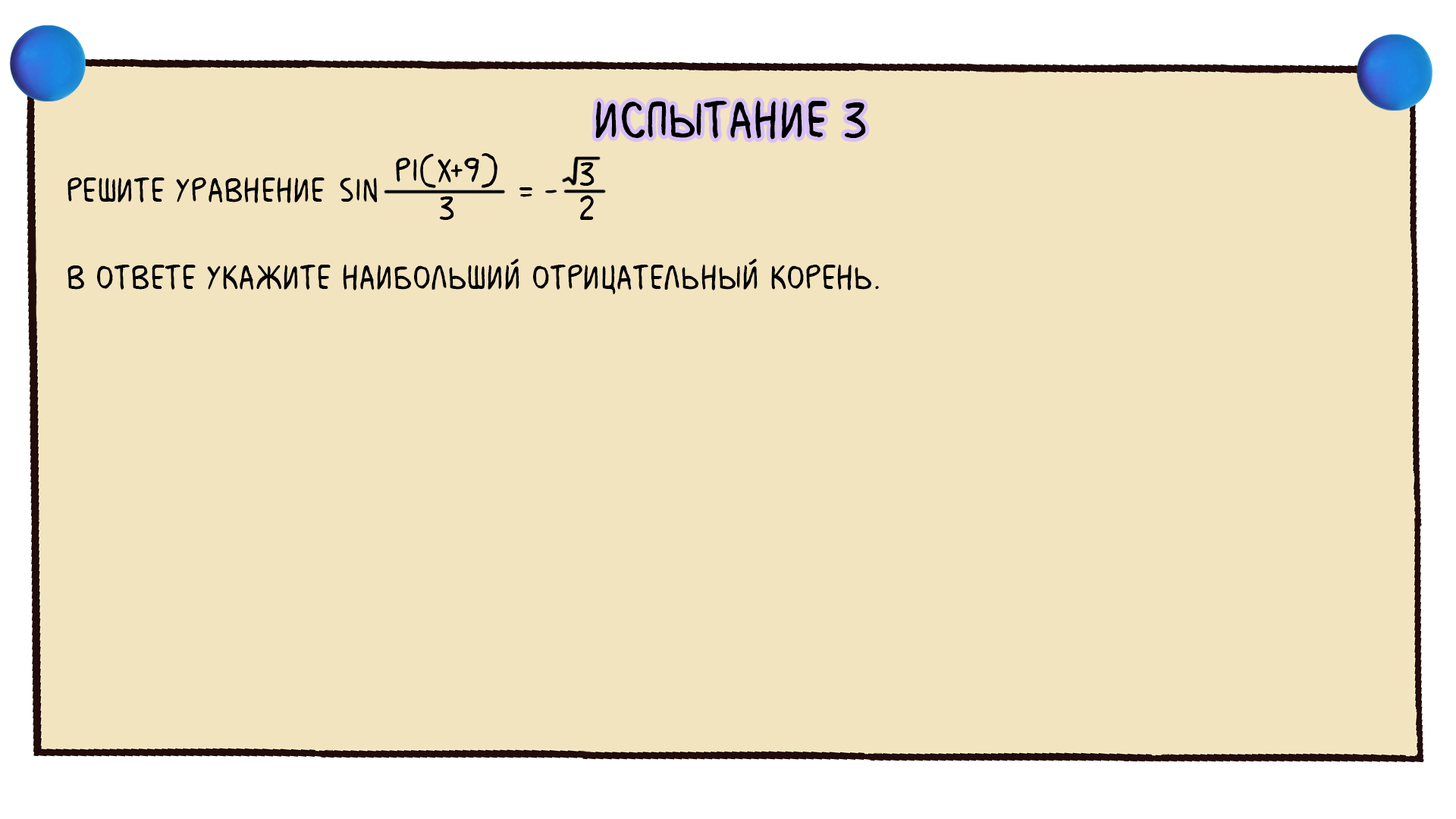
<style>
.page{position:relative;width:1456px;height:819px;background:#f3e4c0}
.page>*{position:absolute;margin:0}
.t1{font:54.6px "MilkMustacheBB";color:#000000}
.t2{font:36.4px "MilkMustacheBB";color:#000000}
</style>
<div class="page">
<p class="t1" style="left:595px;top:100px;width:271px;height:40px">испытание 3</p>
<p class="t2" style="left:67px;top:177px;width:812px;height:117px">Решите уравнение sin<br><br>В ответе укажите наибольший отрицательный корень.</p>
</div>
